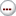
<style>
.page{position:relative;width:16px;height:16px;background:#ffffff}
.page>*{position:absolute;margin:0}
.t1{font:8px "Verdana-Bold";letter-spacing:-0.1em;color:#660000;font-weight:bold;scale:1.3 1}
</style>
<div class="page">
<p class="t1" style="left:3px;top:8px;width:9px;height:3px">...</p>
</div>
